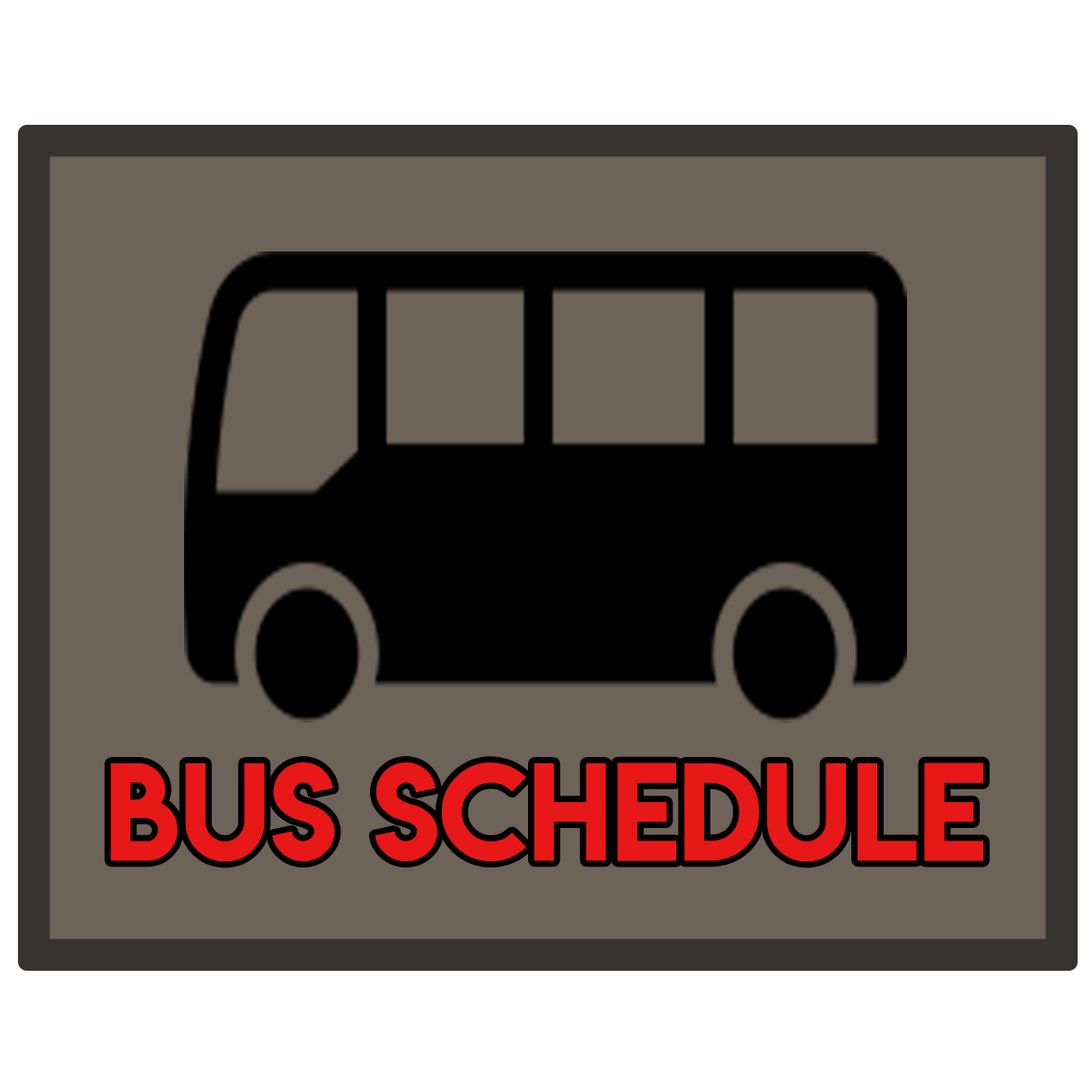
<style>
.page{position:relative;width:1092px;height:1092px;background:#6e6358}
.page>*{position:absolute;margin:0}
.t1{font:123.2px "LemonMilk";color:#e81818}
</style>
<div class="page">
<p class="t1" style="left:110px;top:762px;width:873px;height:100px">BUS SCHEDULE</p>
</div>
